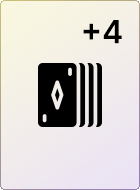
<style>
.page{position:relative;width:140px;height:190px}
.page>*{position:absolute;margin:0}
.t1{font:32px "Inter-SemiBold";color:#000000}
</style>
<div class="page">
<p class="t1" style="left:83px;top:20px;width:39px;height:24px">+4</p>
</div>
